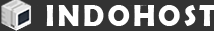
<style>
.page{position:relative;width:214px;height:31px;background:#333333}
.page>*{position:absolute;margin:0}
.t1{font:30px "BerlinSansFBDemi-Bold";letter-spacing:0.1em;color:#ffffff}
</style>
<div class="page">
<p class="t1" style="left:46px;top:5px;width:169px;height:21px">INDOHOST</p>
</div>
